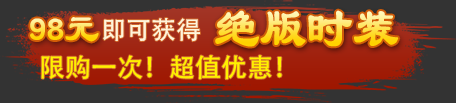
<style>
.page{position:relative;width:456px;height:103px;background:#333333}
.page>*{position:absolute;margin:0}
.t1{font:36px "HYf0gj"}
.t2{font:48.6px "HYf0gj";letter-spacing:-0.05em}
.t3{font:25px "AdobeHeitiStd-Regular";color:#fff5da}
.t4{font:26px "AdobeHeitiStd-Regular";color:#fff000}
</style>
<div class="page">
<p class="t1" style="left:30px;top:17px;width:69px;height:25px">98元</p>
<p class="t2" style="left:215px;top:10px;width:184px;height:37px">绝版时装</p>
<p class="t3" style="left:103px;top:18px;width:97px;height:24px">即可获得</p>
<p class="t4" style="left:41px;top:55px;width:241px;height:25px">限购一次！超值优惠！</p>
</div>
